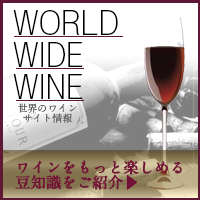
<style>
.page{position:relative;width:200px;height:200px;background:#ffffff}
.page>*{position:absolute;margin:0}
.t1{font:30px/32px "NtodayStd-ExLight-KL";letter-spacing:0.005em;color:#000000}
.t2{font:10px/10px "A1MinchoStd-Bold";letter-spacing:0.005em;color:#6a6a6a}
.t3{font:15px/15px "A1MinchoStd-Bold";letter-spacing:0.005em;color:#731136;font-weight:bold}
.t4{font:15px/15px "KozGoPr6N-Regular";letter-spacing:0.005em;color:#731136;font-weight:bold}
</style>
<div class="page">
<p class="t1" style="left:13px;top:10px;width:105px;height:89px;text-align:justify">WORLD<br>WIDE<br>WINE</p>
<p class="t2" style="left:18px;top:103px;width:59px;height:20px;text-align:center">世界のワイン<br>サイト情報</p>
<p class="t3" style="left:15px;top:160px;width:167px;height:30px;text-align:justify">ワインをもっと楽しめる<br>豆知識をご紹介<span class="t4">▶</span></p>
</div>
